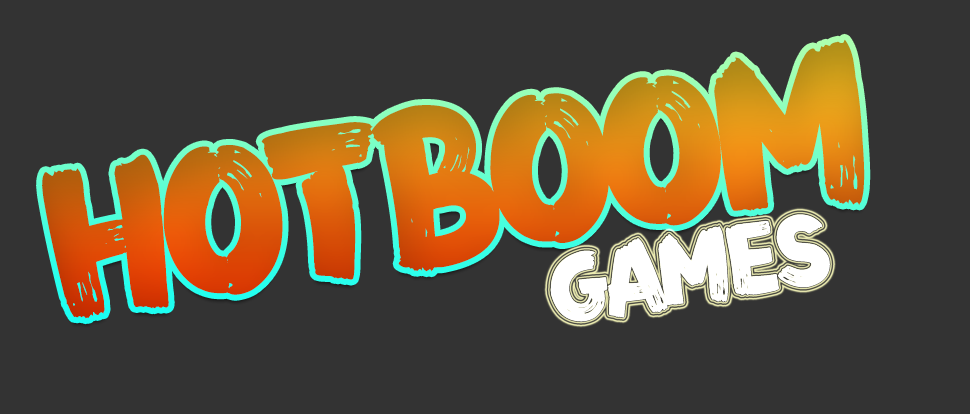
<style>
.page{position:relative;width:970px;height:414px;background:#333333}
.page>*{position:absolute;margin:0}
.t1{font:194px "FZFENSTXJW--GB1-0";letter-spacing:-0.08em}
.t2{font:90px "FZFENSTXJW--GB1-0";letter-spacing:-0.08em;color:#ffffff}
</style>
<div class="page">
<p class="t1" style="left:42px;top:39px;width:823px;height:280px;rotate:-9deg">HOTBOOM</p>
<p class="t2" style="left:550px;top:214px;width:280px;height:108px;rotate:-9deg">GAMES</p>
</div>
